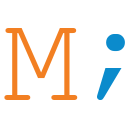
<style>
.page{position:relative;width:128px;height:128px;background:#ffffff}
.page>*{position:absolute;margin:0}
.t1{font:125px "CourierNewPSMT";color:#f27f22}
.t2{font:125px "CourierNewPSMT";color:#0b8bcc}
</style>
<div class="page">
<p class="t1" style="left:4px;top:28px;width:121px;height:72px">M<span class="t2">;</span></p>
</div>
